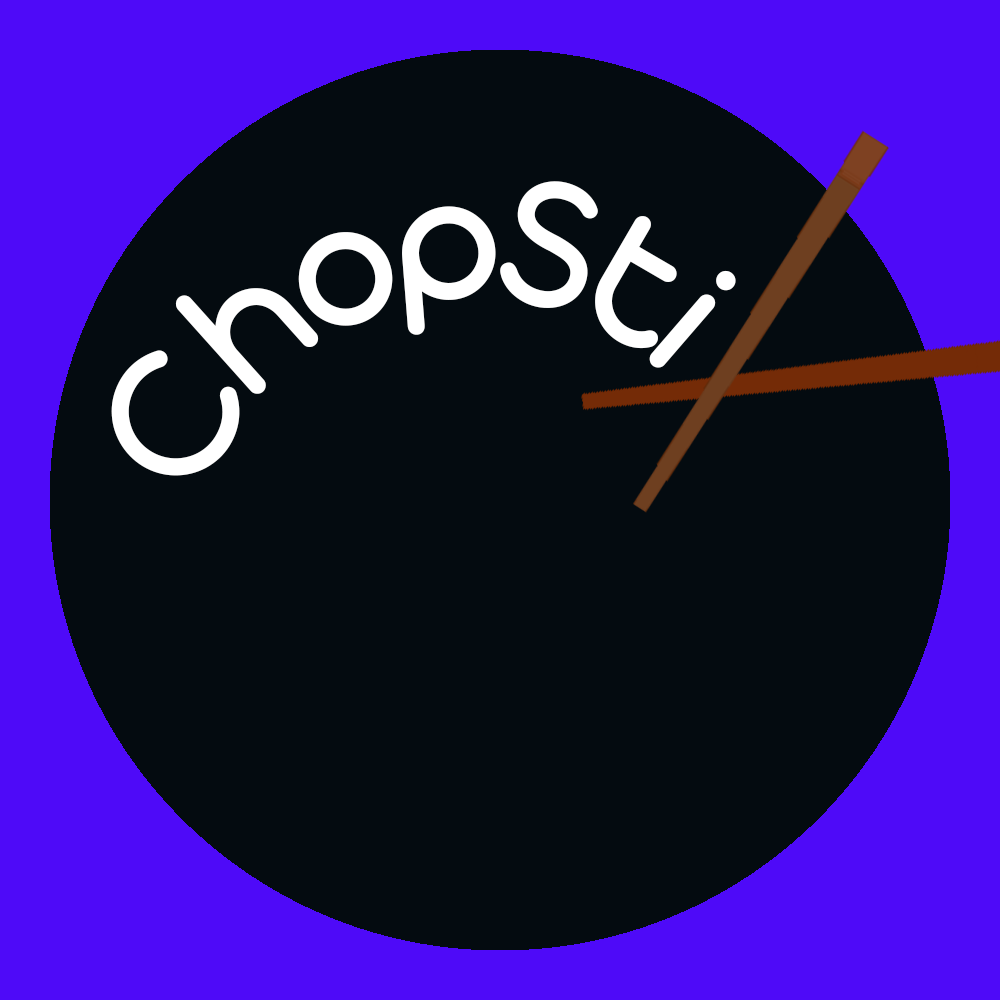
<style>
.page{position:relative;width:1000px;height:1000px;background:#040b10}
.page>*{position:absolute;margin:0}
.t1{font:195.8px "AristotelicaDisplay-Regular";letter-spacing:-0.08em;color:#ffffff}
</style>
<div class="page">
<p class="t1" style="left:111px;top:181px;width:625px;height:295px;rotate:-8deg">ChopSti</p>
</div>
